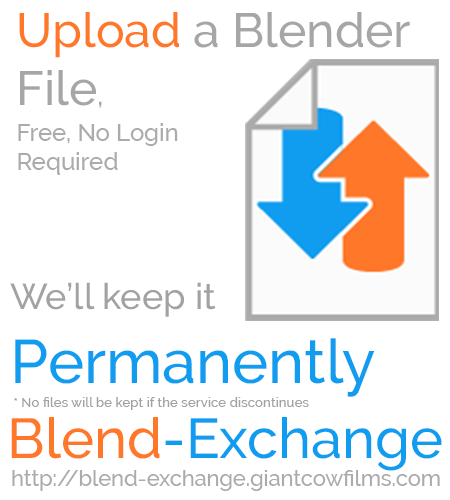
<style>
.page{position:relative;width:450px;height:500px;background:#ffffff}
.page>*{position:absolute;margin:0}
.t1{font:48px "Raleway-Medium";color:#a6a6a6}
.t2{font:48px "Raleway-Medium";color:#ff782a}
.t3{font:30px "Raleway-Medium";color:#a6a6a6}
.t4{font:24px "Raleway-Medium";color:#ababab}
.t5{font:36px "Raleway-Medium";color:#a2a2a2}
.t6{font:61.1px "Raleway-Medium";color:#109df0}
.t7{font:13.4px "Raleway-Medium";color:#a2a2a2}
.t8{font:55.9px "Raleway-Medium";color:#109df0}
.t9{font:55.9px "Raleway-Medium";color:#ff782a}
.t10{font:21.7px "Raleway-Medium";color:#ababab}
</style>
<div class="page">
<p class="t1" style="left:19px;top:12px;width:391px;height:96px"><span class="t2">Upload </span>a Blender File<span class="t3">,</span></p>
<p class="t4" style="left:18px;top:123px;width:160px;height:52px">Free, No Login<br>Required</p>
<p class="t5" style="left:10px;top:282px;width:365px;height:115px">We’ll keep it<br><span class="t6">Permanently</span></p>
<p class="t7" style="left:14px;top:397px;width:295px;height:13px">* No files will be kept if the service discontinues</p>
<p class="t8" style="left:11px;top:417px;width:431px;height:54px"><span class="t9">Blend</span>-Exchange</p>
<p class="t10" style="left:12px;top:470px;width:428px;height:21px">http://blend-exchange.giantcowfilms.com</p>
</div>
